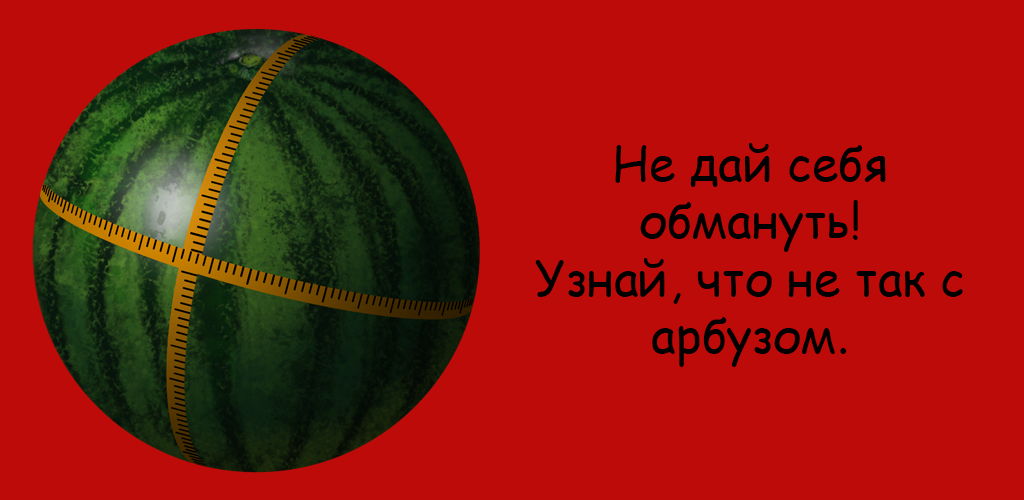
<style>
.page{position:relative;width:1024px;height:500px;background:#bd0b09}
.page>*{position:absolute;margin:0}
.t1{font:48px "ComicSansMS";color:#000000}
</style>
<div class="page">
<p class="t1" style="left:535px;top:143px;width:428px;height:224px;text-align:center">Не дай себя обмануть!<br>Узнай, что не так с арбузом.</p>
</div>
